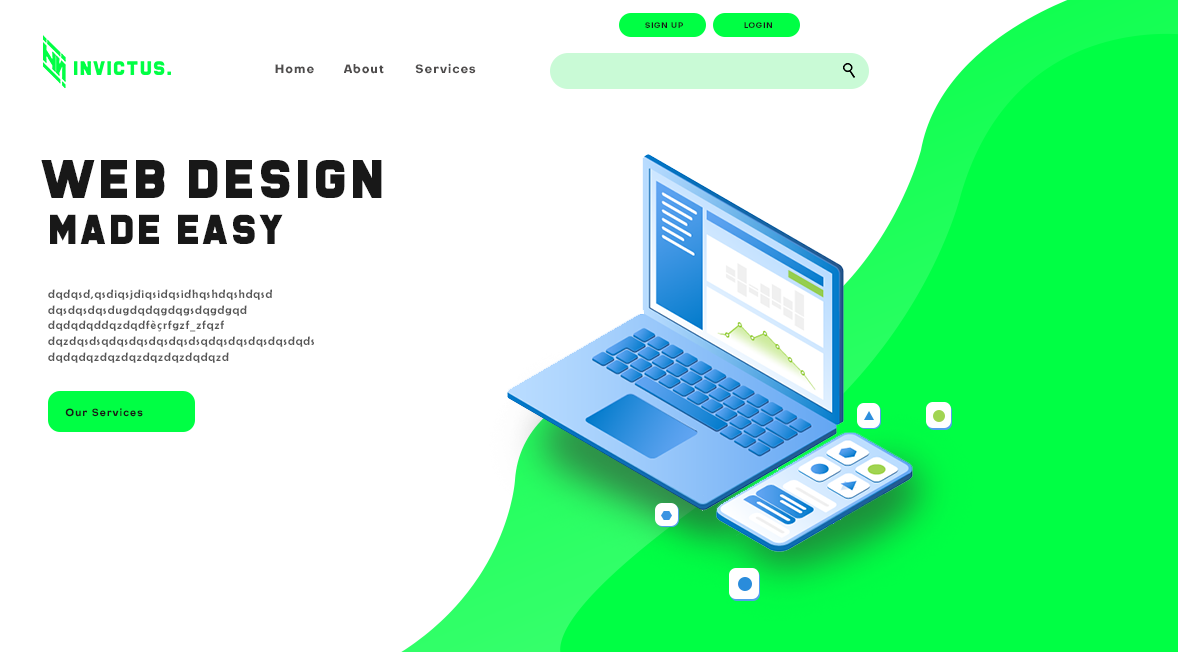
<style>
.page{position:relative;width:1178px;height:652px;background:#ffffff}
.page>*{position:absolute;margin:0}
.t1{font:7.8px "Octarine-Bold";letter-spacing:0.08em;color:#181818}
.t2{font:12px "Octarine-Bold";letter-spacing:0.08em;color:#4e4c4c}
.t3{font:48.6px "BoomerTantrum";letter-spacing:0.08em;color:#181818}
.t4{font:37.2px "BoomerTantrum";letter-spacing:0.08em;color:#181818}
.t5{font:12px/15.7px "BerlinSansFB-Reg";letter-spacing:0.08em;color:#575757}
.t6{font:10.3px "Octarine-Bold";letter-spacing:0.08em;color:#181818}
</style>
<div class="page">
<p class="t1" style="left:645px;top:22px;width:38px;height:6px">SIGN UP</p>
<p class="t1" style="left:744px;top:22px;width:28px;height:6px">LOGIN</p>
<p class="t2" style="left:275px;top:64px;width:39px;height:10px">Home</p>
<p class="t2" style="left:344px;top:64px;width:40px;height:10px">About</p>
<p class="t2" style="left:415px;top:63px;width:61px;height:11px">Services</p>
<p class="t3" style="left:41px;top:160px;width:341px;height:38px">Web design</p>
<p class="t4" style="left:50px;top:214px;width:233px;height:30px">made easy</p>
<p class="t5" style="left:48px;top:289px;width:266px;height:74px">dqdqsd,qsdiqsjdiqsidqsidhqshdqshdqsd<br>dqsdqsdqsdugdqdqgdqgsdqgdgqd<br>dqdqdqddqzdqdfèçrfgzf_zfqzf<br>dqzdqsdsqdqsdqsdqsdqsdsqdqsdqsdqsdqsdqds<br>dqdqdqzdqzdqzdqzdqzdqdqzd</p>
<p class="t6" style="left:65px;top:408px;width:78px;height:9px">Our Services</p>
</div>
